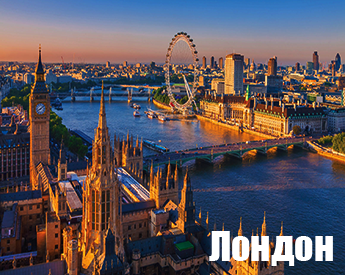
<style>
.page{position:relative;width:345px;height:275px}
.page>*{position:absolute;margin:0}
.t1{font:38px "Impact";color:#ffffff}
</style>
<div class="page">
<p class="t1" style="left:209px;top:231px;width:124px;height:35px">Лондон</p>
</div>
